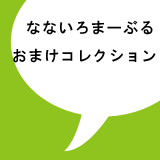
<style>
.page{position:relative;width:160px;height:160px;background:#ffffff}
.page>*{position:absolute;margin:0}
.t1{font:15px "HGSGothicE";letter-spacing:0.08em;color:#000000}
</style>
<div class="page">
<p class="t1" style="left:27px;top:20px;width:126px;height:15px">なないろまーぶる</p>
<p class="t1" style="left:13px;top:48px;width:143px;height:15px">おまけコレクション</p>
</div>
